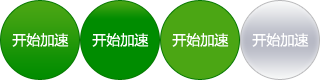
<style>
.page{position:relative;width:320px;height:80px;background:#ffffff}
.page>*{position:absolute;margin:0}
.t1{font:14px "MicrosoftYaHei";color:#ffffff}
</style>
<div class="page">
<p class="t1" style="left:12px;top:33px;width:57px;height:14px">开始加速</p>
<p class="t1" style="left:92px;top:33px;width:57px;height:14px">开始加速</p>
<p class="t1" style="left:172px;top:33px;width:57px;height:14px">开始加速</p>
<p class="t1" style="left:252px;top:33px;width:57px;height:14px">开始加速</p>
</div>
